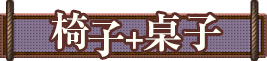
<style>
.page{position:relative;width:267px;height:61px;background:#ffffff}
.page>*{position:absolute;margin:0}
.t1{font:40px "RyuminPr6N-ExBold";letter-spacing:-0.08em;color:#fffff7}
.t2{font:40px "RyuminPr6N-ExBold";letter-spacing:0.07em;color:#fffff7}
.t3{font:30px "RyuminPro-ExBold";letter-spacing:-0.1em;color:#fffff7}
</style>
<div class="page">
<p class="t1" style="left:51px;top:12px;width:38px;height:38px">椅</p>
<p class="t2" style="left:143px;top:13px;width:78px;height:39px">桌子</p>
<p class="t1" style="left:88px;top:20px;width:37px;height:37px">子</p>
<p class="t3" style="left:126px;top:32px;width:17px;height:17px">+</p>
</div>
